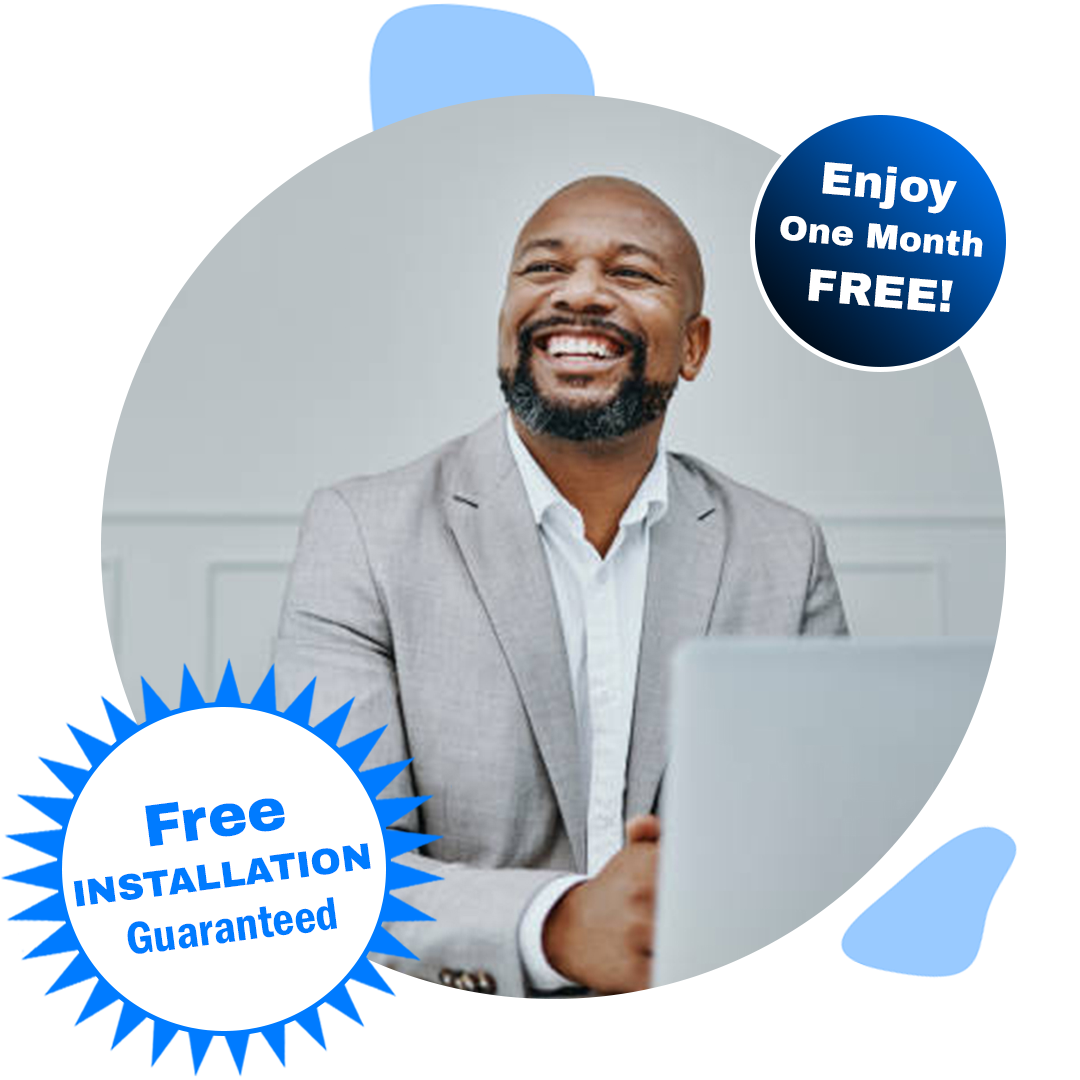
<style>
.page{position:relative;width:1080px;height:1080px;background:#ffffff}
.page>*{position:absolute;margin:0}
.t1{font:45.8px "ArchivoBlack-Regular";color:#ffffff}
.t2{font:34.9px "ArchivoBlack-Regular";color:#ffffff}
.t3{font:59.2px "ArchivoBlack-Regular";color:#007bff}
.t4{font:36.8px "ArchivoBlack-Regular";color:#007bff}
.t5{font:47.5px "FranklinGothic-DemiCond";color:#007bff}
</style>
<div class="page">
<p class="t1" style="left:822px;top:162px;width:135px;height:52px;rotate:5deg">Enjoy</p>
<p class="t2" style="left:780px;top:216px;width:203px;height:41px;rotate:5deg">One Month</p>
<p class="t1" style="left:808px;top:269px;width:145px;height:43px;rotate:5deg">FREE!</p>
<p class="t3" style="left:145px;top:798px;width:140px;height:49px;rotate:-7deg">Free</p>
<p class="t4" style="left:73px;top:843px;width:298px;height:64px;rotate:-7deg">INSTALLATION</p>
<p class="t5" style="left:127px;top:897px;width:210px;height:57px;rotate:-7deg">Guaranteed</p>
</div>
